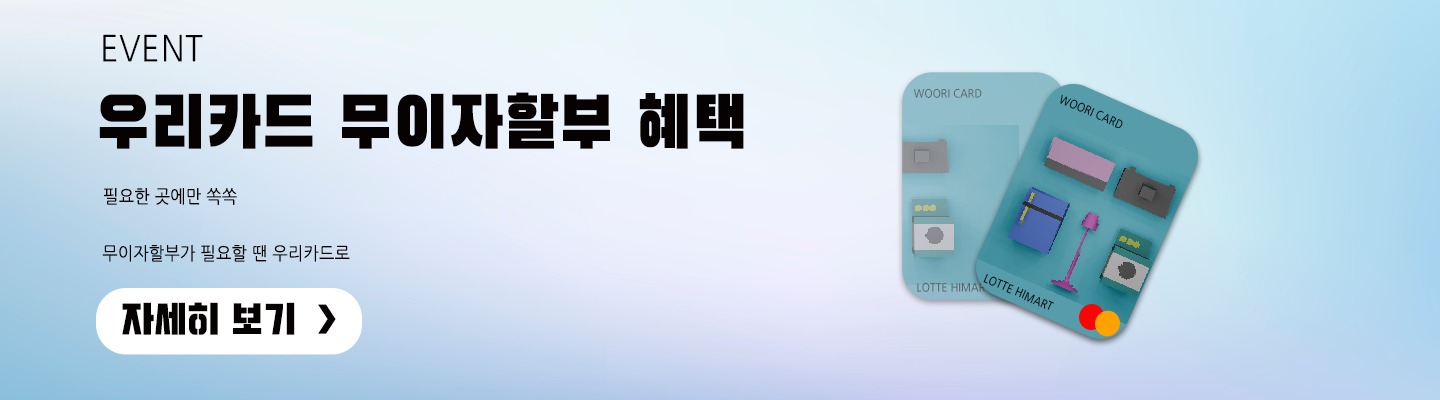
<style>
.page{position:relative;width:1440px;height:400px}
.page>*{position:absolute;margin:0}
.t1{font:36px "NanumGothic";letter-spacing:0.02em;color:#000000;text-transform:uppercase;scale:0.9 1}
.t2{font:11.3px "NanumGothic";letter-spacing:0.02em;text-transform:uppercase;scale:0.9 1}
.t3{font:72px "BlackHanSans-Regular";letter-spacing:0.02em;color:#060202;text-transform:uppercase;scale:0.9 1}
.t4{font:11.4px "NanumGothic";letter-spacing:0.02em;text-transform:uppercase;scale:0.9 1}
.t5{font:18px "NanumGothic";letter-spacing:0.02em;color:#060202;text-transform:uppercase;scale:0.9 1}
.t6{font:36px "Typo_SsangmunDong_St";letter-spacing:0.02em;color:#060202;text-transform:uppercase;scale:0.9 1}
</style>
<div class="page">
<p class="t1" style="left:103px;top:34px;width:100px;height:28px">EVENT</p>
<p class="t2" style="left:913px;top:88px;width:69px;height:10px">woori card</p>
<p class="t3" style="left:99px;top:92px;width:645px;height:57px">우리카드 무이자할부 혜택</p>
<p class="t4" style="left:1060px;top:94px;width:63px;height:34px;rotate:24deg">woori card</p>
<p class="t5" style="left:104px;top:188px;width:133px;height:17px">필요한 곳에만 쏙쏙</p>
<p class="t5" style="left:102px;top:245px;width:248px;height:17px">무이자할부가 필요할 땐 우리카드로</p>
<p class="t4" style="left:983px;top:274px;width:71px;height:36px;rotate:24deg">lotte himart</p>
<p class="t2" style="left:917px;top:282px;width:74px;height:10px">lotte himart</p>
<p class="t6" style="left:122px;top:302px;width:214px;height:33px">자세히 보기  &gt;</p>
</div>
